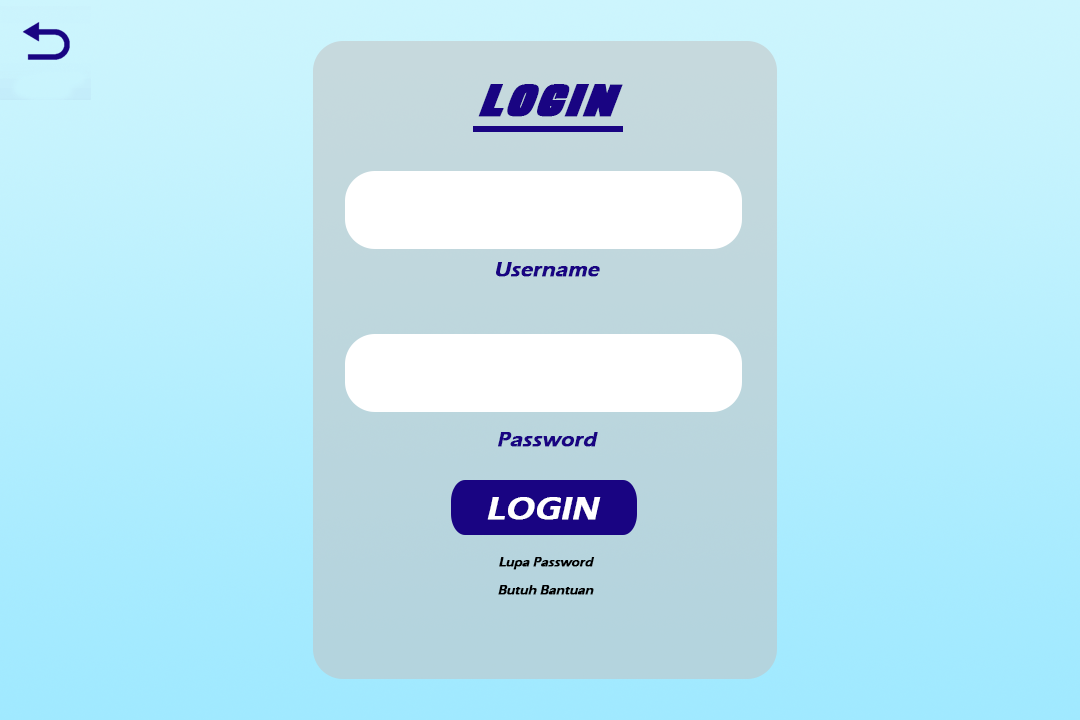
<style>
.page{position:relative;width:1080px;height:720px}
.page>*{position:absolute;margin:0}
.t1{font:45.4px "EMINOR-BlackItalic";color:#190482;font-weight:bold;font-style:italic;scale:1.19 1}
.t2{font:20.9px "ErasITC-Demi";color:#190482;font-weight:bold;font-style:italic}
.t3{font:33.4px "ErasITC-Demi";color:#ffffff;font-weight:bold;font-style:italic}
.t4{font:12.5px "ErasITC-Demi";color:#000000;font-weight:bold;font-style:italic}
</style>
<div class="page">
<p class="t1" style="left:478px;top:84px;width:145px;height:33px">LOGIN</p>
<p class="t2" style="left:496px;top:262px;width:104px;height:15px">Username</p>
<p class="t2" style="left:498px;top:432px;width:100px;height:15px">Password</p>
<p class="t3" style="left:487px;top:497px;width:114px;height:23px">LOGIN</p>
<p class="t4" style="left:499px;top:557px;width:96px;height:13px">Lupa Password</p>
<p class="t4" style="left:498px;top:585px;width:96px;height:10px">Butuh Bantuan</p>
</div>
